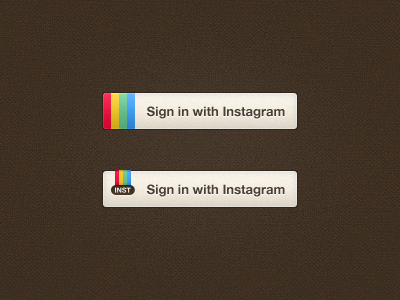
<style>
.page{position:relative;width:400px;height:300px}
.page>*{position:absolute;margin:0}
.t1{font:13px "HelveticaNeue-Bold";color:#483e33}
</style>
<div class="page">
<p class="t1" style="left:147px;top:106px;width:138px;height:13px">Sign in with Instagram</p>
<p class="t1" style="left:147px;top:184px;width:138px;height:13px">Sign in with Instagram</p>
</div>
